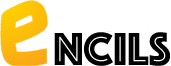
<style>
.page{position:relative;width:171px;height:66px;background:#ffffff}
.page>*{position:absolute;margin:0}
.t1{font:48px "Phosphate-Inline";color:#000000}
</style>
<div class="page">
<p class="t1" style="left:54px;top:32px;width:116px;height:34px">NCILS</p>
</div>
